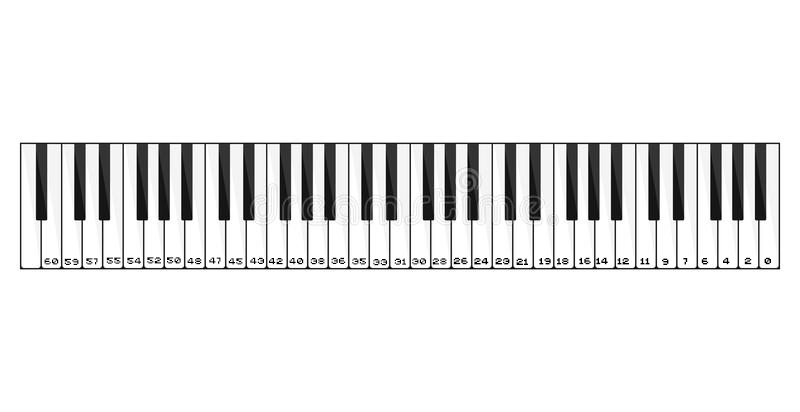
<style>
.page{position:relative;width:800px;height:412px;background:#ffffff}
.page>*{position:absolute;margin:0}
.t1{font:10px "I-pixel-u";color:#000000}
</style>
<div class="page">
<p class="t1" style="left:106px;top:257px;width:15px;height:7px">55</p>
<p class="t1" style="left:127px;top:257px;width:14px;height:7px">54</p>
<p class="t1" style="left:147px;top:257px;width:14px;height:7px">52</p>
<p class="t1" style="left:167px;top:257px;width:14px;height:7px">50</p>
<p class="t1" style="left:209px;top:257px;width:12px;height:7px">47</p>
<p class="t1" style="left:250px;top:257px;width:14px;height:7px">43</p>
<p class="t1" style="left:331px;top:257px;width:15px;height:7px">36</p>
<p class="t1" style="left:453px;top:257px;width:15px;height:8px">26</p>
<p class="t1" style="left:579px;top:257px;width:12px;height:8px">16</p>
<p class="t1" style="left:596px;top:257px;width:12px;height:8px">14</p>
<p class="t1" style="left:723px;top:257px;width:7px;height:8px">4</p>
<p class="t1" style="left:744px;top:257px;width:8px;height:8px">2</p>
<p class="t1" style="left:764px;top:257px;width:7px;height:8px">0</p>
<p class="t1" style="left:44px;top:258px;width:15px;height:7px">60</p>
<p class="t1" style="left:64px;top:258px;width:15px;height:7px">59</p>
<p class="t1" style="left:86px;top:258px;width:12px;height:7px">57</p>
<p class="t1" style="left:187px;top:258px;width:15px;height:7px">48</p>
<p class="t1" style="left:228px;top:258px;width:15px;height:7px">45</p>
<p class="t1" style="left:269px;top:258px;width:14px;height:7px">42</p>
<p class="t1" style="left:289px;top:258px;width:15px;height:7px">40</p>
<p class="t1" style="left:310px;top:258px;width:15px;height:7px">38</p>
<p class="t1" style="left:352px;top:258px;width:14px;height:7px">35</p>
<p class="t1" style="left:373px;top:259px;width:14px;height:7px">33</p>
<p class="t1" style="left:394px;top:258px;width:12px;height:7px">31</p>
<p class="t1" style="left:412px;top:258px;width:14px;height:7px">30</p>
<p class="t1" style="left:432px;top:258px;width:15px;height:7px">28</p>
<p class="t1" style="left:474px;top:258px;width:15px;height:7px">24</p>
<p class="t1" style="left:495px;top:258px;width:15px;height:7px">23</p>
<p class="t1" style="left:516px;top:258px;width:12px;height:7px">21</p>
<p class="t1" style="left:539px;top:258px;width:12px;height:7px">19</p>
<p class="t1" style="left:557px;top:258px;width:12px;height:7px">18</p>
<p class="t1" style="left:617px;top:258px;width:12px;height:7px">12</p>
<p class="t1" style="left:640px;top:258px;width:10px;height:7px">11</p>
<p class="t1" style="left:662px;top:258px;width:7px;height:7px">9</p>
<p class="t1" style="left:683px;top:258px;width:5px;height:7px">7</p>
<p class="t1" style="left:701px;top:258px;width:8px;height:7px">6</p>
</div>
